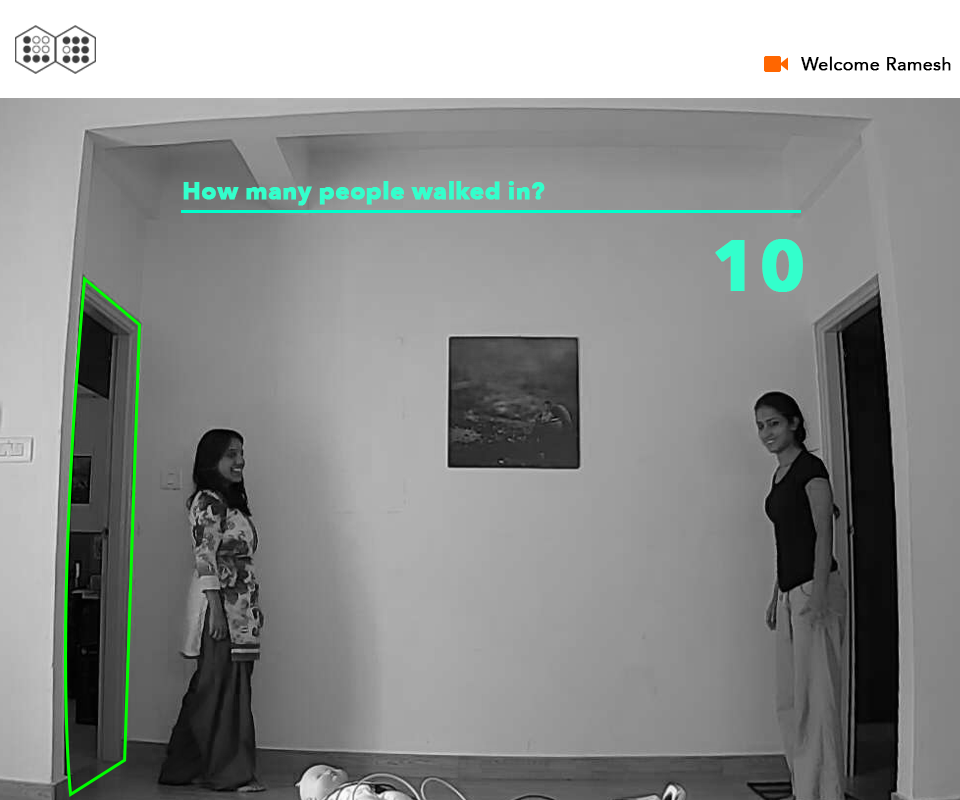
<style>
.page{position:relative;width:960px;height:800px}
.page>*{position:absolute;margin:0}
.t1{font:18px "Avenir-Roman";color:#000000;font-weight:bold}
.t2{font:24px "AvenirNext-Bold";color:#33ffcc;font-weight:bold}
.t3{font:70px "AvenirNext-Bold";color:#33ffcc;font-weight:bold}
</style>
<div class="page">
<p class="t1" style="left:801px;top:56px;width:150px;height:15px">Welcome Ramesh</p>
<p class="t2" style="left:183px;top:181px;width:362px;height:25px">How many people walked in?</p>
<p class="t3" style="left:715px;top:239px;width:88px;height:53px">10</p>
</div>
